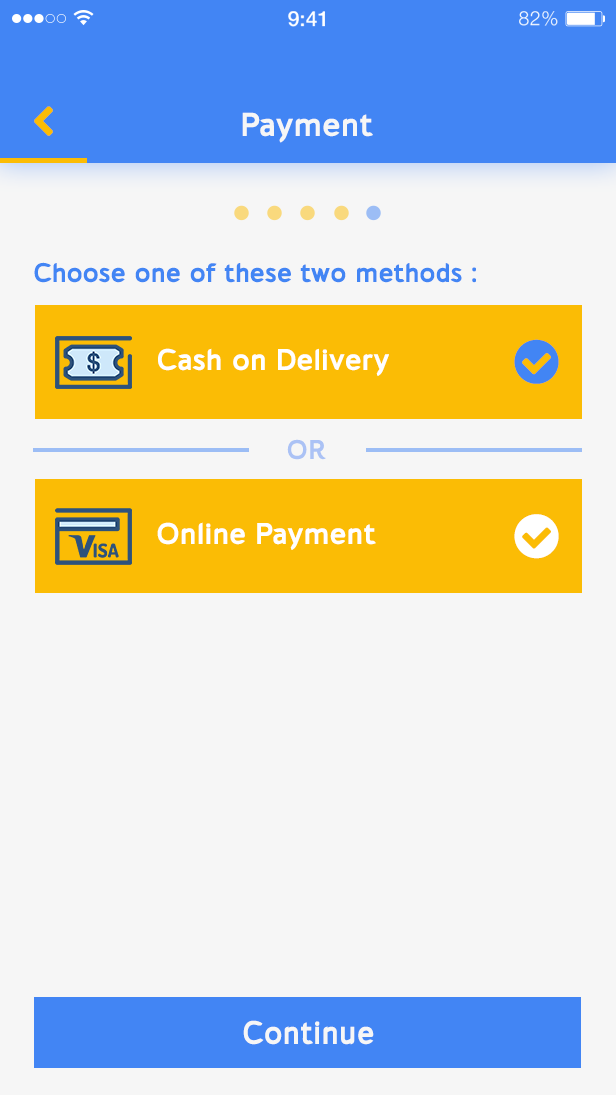
<style>
.page{position:relative;width:616px;height:1095px;background:#f6f6f6}
.page>*{position:absolute;margin:0}
.t1{font:21.3px "HelveticaNeue-Medium";color:#ffffff}
.t2{font:19.6px "HelveticaNeue-Light";letter-spacing:0.025em;color:#ffffff}
.t3{font:33px "cajitobold";color:#f6f6f6}
.t4{font:27px "cajitobold";color:#4285f4}
.t5{font:30px "cajitobold";color:#ffffff}
.t6{font:27px "cajitobold";color:#abc2f5}
.t7{font:33px "cajitobold";color:#f6f6f6;scale:0.94 1}
</style>
<div class="page">
<p class="t1" style="left:288px;top:11px;width:37px;height:16px">9:41</p>
<p class="t2" style="left:519px;top:11px;width:39px;height:15px">82%</p>
<p class="t3" style="left:242px;top:112px;width:131px;height:31px">Payment</p>
<p class="t4" style="left:34px;top:262px;width:442px;height:21px">Choose one of these two methods :</p>
<p class="t5" style="left:158px;top:348px;width:231px;height:28px">Cash on Delivery</p>
<p class="t6" style="left:287px;top:439px;width:39px;height:21px">OR</p>
<p class="t5" style="left:157px;top:522px;width:219px;height:28px">Online Payment</p>
<p class="t7" style="left:243px;top:1020px;width:131px;height:25px">Continue</p>
</div>
